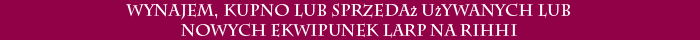
<style>
.page{position:relative;width:700px;height:40px;background:#910147}
.page>*{position:absolute;margin:0}
.t1{font:16px "CharlemagneStd-Bold";color:#ffffff}
.t2{font:16px "MinionPro-Regular";color:#ffffff}
</style>
<div class="page">
<p class="t1" style="left:126px;top:3px;width:445px;height:35px;text-align:center">wynajem, kupno lub sprzeda<span class="t2">ż</span> u<span class="t2">ż</span>ywanych lub <br>nowych ekwipunek larp na rihhi</p>
</div>
